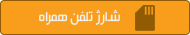
<style>
.page{position:relative;width:190px;height:35px;background:#f99d1c}
.page>*{position:absolute;margin:0}
.t1{font:15px "Mj_BeirutLtX3";color:#f1f2f2}
</style>
<div class="page">
<p class="t1" style="left:39px;top:9px;width:81px;height:16px">شـارژ تلفن همراه</p>
</div>
